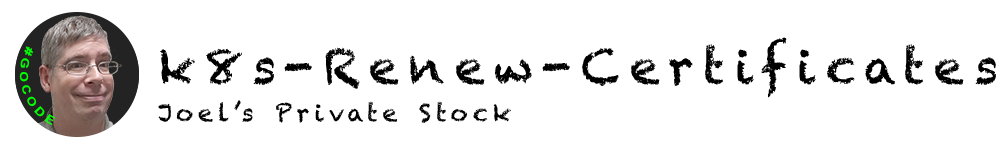
<style>
.page{position:relative;width:1000px;height:150px;background:#ffffff}
.page>*{position:absolute;margin:0}
.t1{font:48px "Chalkduster";letter-spacing:0.2em;color:#000000}
.t2{font:11.2px "Arial-BoldMT";letter-spacing:0.2em;color:#00ff00}
.t3{font:24px "Chalkduster";letter-spacing:0.2em;color:#000000}
</style>
<div class="page">
<p class="t1" style="left:160px;top:37px;width:836px;height:61px">k8s-Renew-Certificates</p>
<p class="t2" style="left:19px;top:46px;width:37px;height:80px;rotate:72deg">#GOCODE</p>
<p class="t3" style="left:158px;top:100px;width:353px;height:23px">Joel’s Private Stock</p>
</div>
